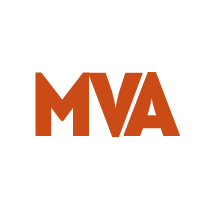
<style>
.page{position:relative;width:200px;height:200px;background:#ffffff}
.page>*{position:absolute;margin:0}
.t1{font:90px "IntroCondBlackFree";color:#cb4b16}
</style>
<div class="page">
<p class="t1" style="left:35px;top:72px;width:145px;height:65px">MVA</p>
</div>
